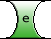
<style>
.page{position:relative;width:51px;height:39px;background:#ffffff}
.page>*{position:absolute;margin:0}
.t1{font:10.9px "Verdana";color:#000000;scale:1.17 1}
</style>
<div class="page">
<p class="t1" style="left:22px;top:15px;width:7px;height:8px">e</p>
</div>
